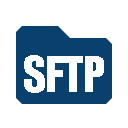
<style>
.page{position:relative;width:128px;height:128px;background:#ffffff}
.page>*{position:absolute;margin:0}
.t1{font:45px "Impact";color:#ffffff}
</style>
<div class="page">
<p class="t1" style="left:24px;top:55px;width:80px;height:38px">SFTP</p>
</div>
